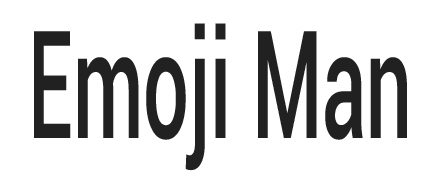
<style>
.page{position:relative;width:440px;height:180px;background:#ffffff}
.page>*{position:absolute;margin:0}
.t1{font:150px "Roboto-Medium";color:#212121;scale:0.54 1}
</style>
<div class="page">
<p class="t1" style="left:34px;top:23px;width:373px;height:148px">Emoji Man</p>
</div>
